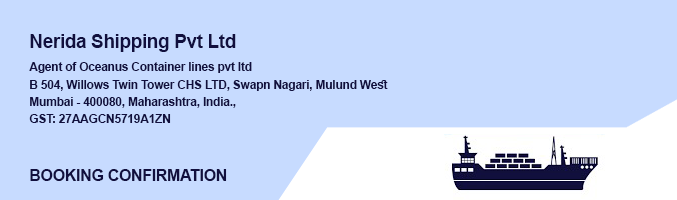
<style>
.page{position:relative;width:677px;height:200px;background:#c7dbff}
.page>*{position:absolute;margin:0}
.t1{font:19px "Arial-BoldMT";letter-spacing:-0.02em;color:#110f3e}
.t2{font:12px "Arial-BoldMT";letter-spacing:-0.02em;color:#110f3e}
.t3{font:12px/17px "Arial-BoldMT";letter-spacing:-0.02em;color:#110f3e}
.t4{font:16px "Arial-BoldMT";letter-spacing:-0.02em;color:#110f3e}
</style>
<div class="page">
<p class="t1" style="left:30px;top:34px;width:206px;height:18px">Nerida Shipping Pvt Ltd</p>
<p class="t2" style="left:29px;top:62px;width:223px;height:11px">Agent of Oceanus Container lines pvt ltd</p>
<p class="t3" style="left:29px;top:80px;width:359px;height:43px;text-align:justify">B 504, Willows Twin Tower CHS LTD, Swapn Nagari, Mulund West <br>Mumbai - 400080, Maharashtra, India.,<br>GST: 27AAGCN5719A1ZN</p>
<p class="t4" style="left:30px;top:169px;width:197px;height:12px">BOOKING CONFIRMATION</p>
</div>
